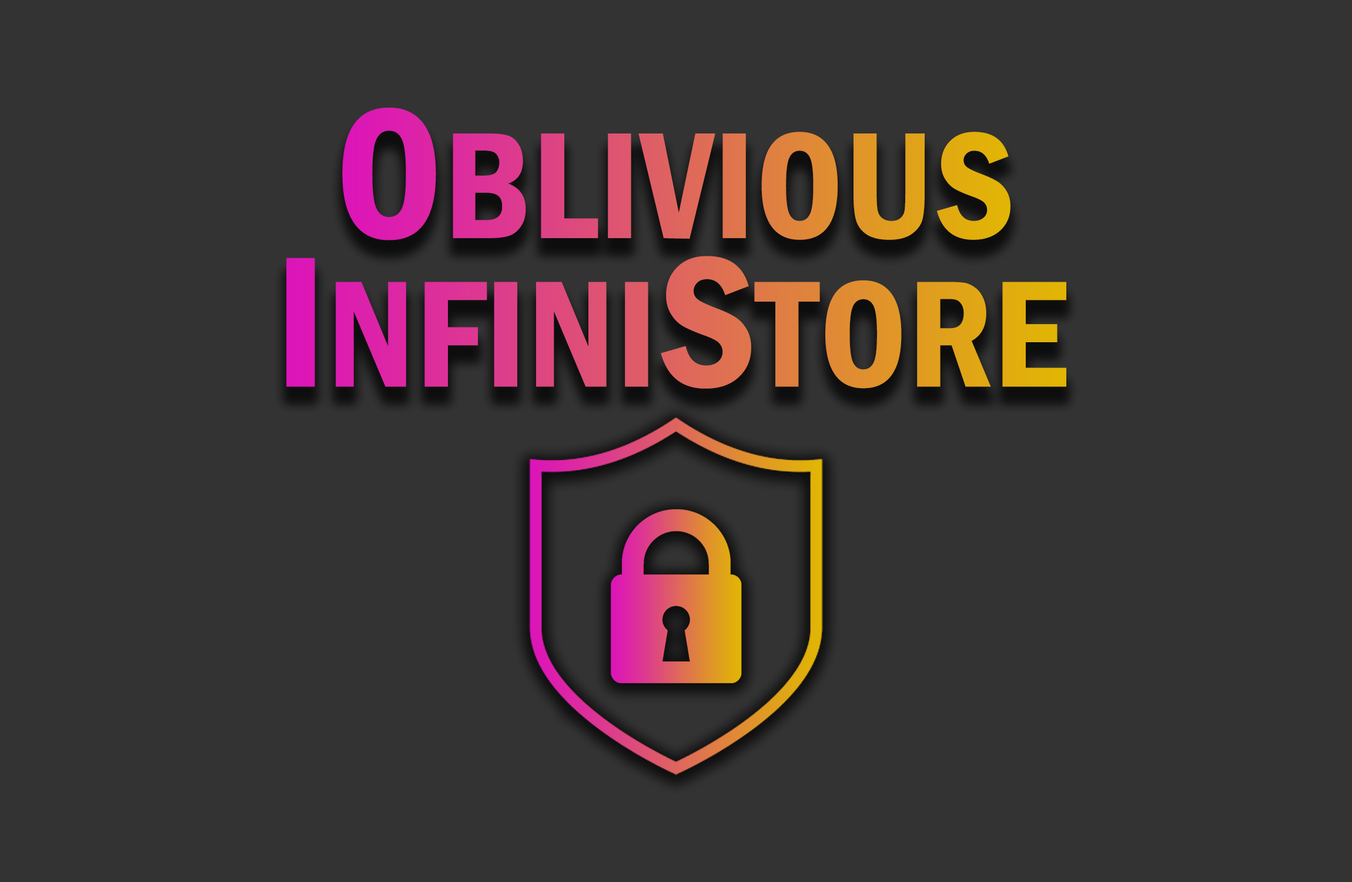
<style>
.page{position:relative;width:1352px;height:882px;background:#333333}
.page>*{position:absolute;margin:0}
.t1{font:156.8px "FranklinGothic-DemiCond"}
.t2{font:192.7px "FranklinGothic-DemiCond"}
</style>
<div class="page">
<p class="t1" style="left:342px;top:108px;width:669px;height:132px"><span class="t2">O</span>BLIVIOUS</p>
<p class="t1" style="left:286px;top:256px;width:780px;height:133px"><span class="t2">I</span>NFINI<span class="t2">S</span>TORE</p>
</div>
